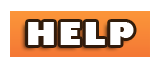
<style>
.page{position:relative;width:160px;height:67px;background:#ffffff}
.page>*{position:absolute;margin:0}
.t1{font:30.5px "GillSans-UltraBold";letter-spacing:0.1em;color:#ffffff}
</style>
<div class="page">
<p class="t1" style="left:28px;top:22px;width:106px;height:23px">HELP</p>
</div>
